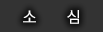
<style>
.page{position:relative;width:103px;height:32px;background:#333333}
.page>*{position:absolute;margin:0}
.t1{font:16px "KoreanGD13-R";letter-spacing:0.04em;color:#ffffff}
</style>
<div class="page">
<p class="t1" style="left:23px;top:10px;width:56px;height:14px">소　　심</p>
</div>
